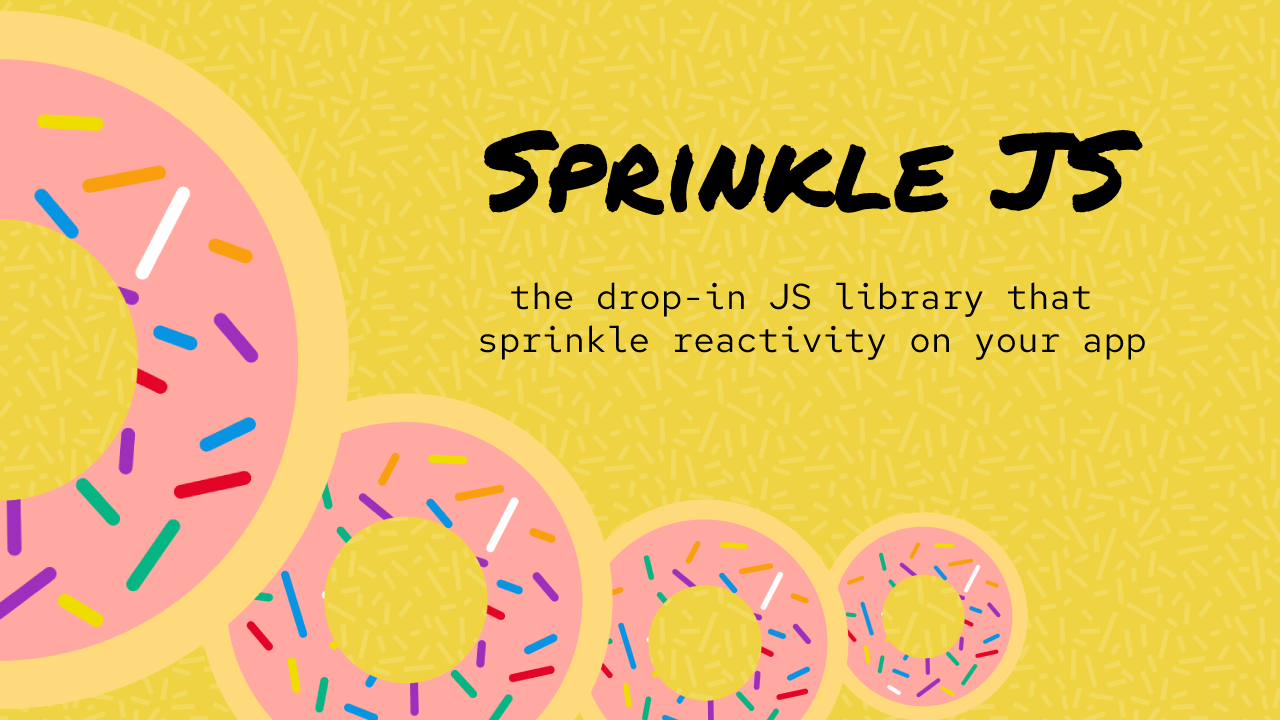
<style>
.page{position:relative;width:1280px;height:720px;background:#f0d342}
.page>*{position:absolute;margin:0}
.t1{font:111px "PermanentMarker-Regular";color:#000000}
.t2{font:36px "RedHatMono-Regular";color:#000000}
</style>
<div class="page">
<p class="t1" style="left:484px;top:130px;width:659px;height:85px">Sprinkle JS</p>
<p class="t2" style="left:480px;top:282px;width:665px;height:78px;text-align:center">the drop-in JS library that <br>sprinkle reactivity on your app</p>
</div>
